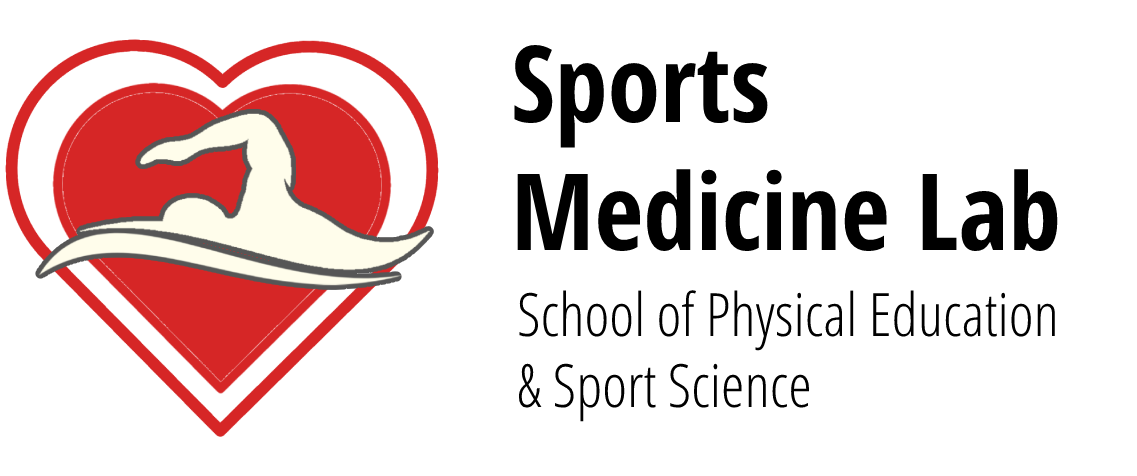
<style>
.page{position:relative;width:1137px;height:476px;background:#ffffff}
.page>*{position:absolute;margin:0}
.t1{font:106.3px "OpenSansCondensed-Bold";color:#000000}
.t2{font:59.7px "OpenSansCondensed-Light";color:#000000}
</style>
<div class="page">
<p class="t1" style="left:514px;top:45px;width:544px;height:207px">Sports <br>Medicine Lab</p>
<p class="t2" style="left:518px;top:290px;width:537px;height:132px">School of Physical Education<br>&amp; Sport Science</p>
</div>
